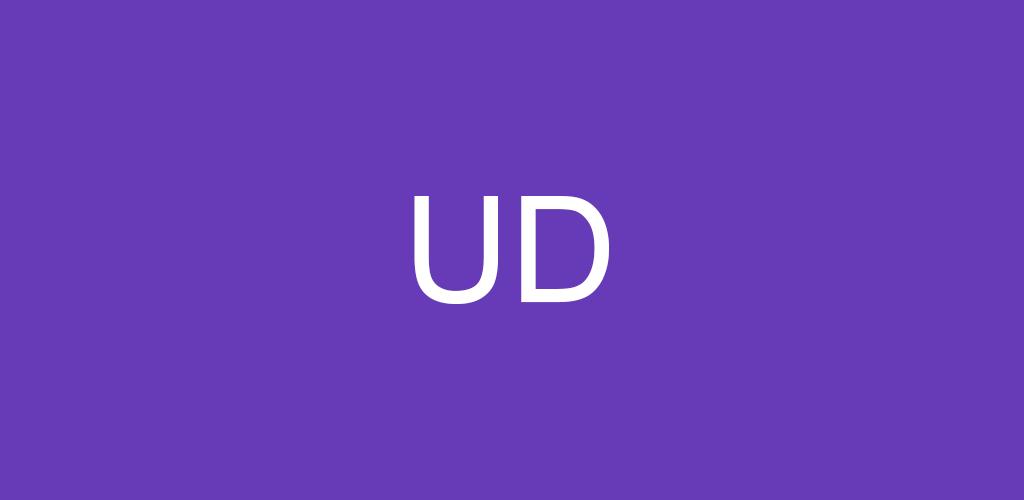
<style>
.page{position:relative;width:1024px;height:500px;background:#673bb7}
.page>*{position:absolute;margin:0}
.t1{font:148px "ArialMT";color:#ffffff}
</style>
<div class="page">
<p class="t1" style="left:414px;top:196px;width:195px;height:108px">UD</p>
</div>
